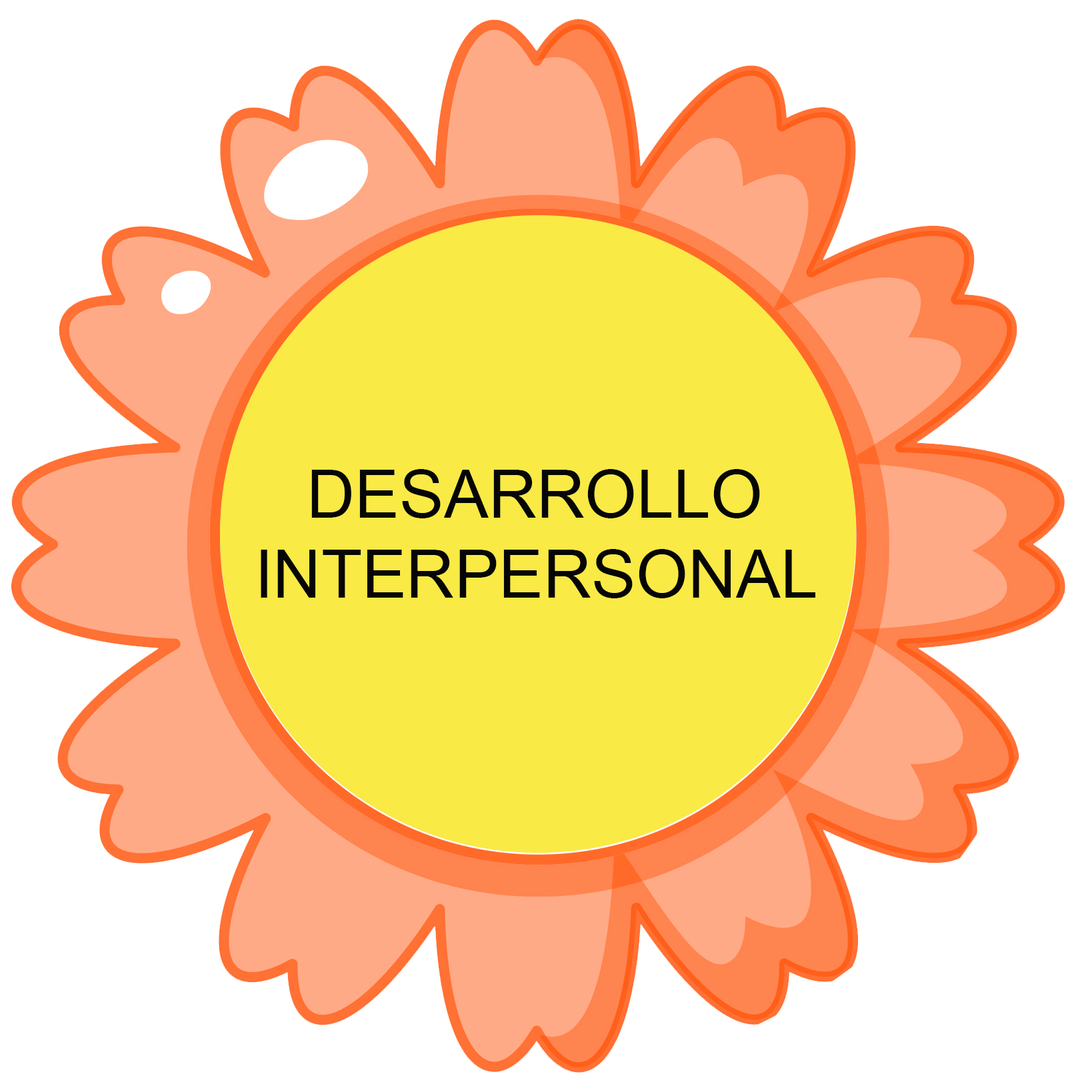
<style>
.page{position:relative;width:1092px;height:1092px;background:#ffffff}
.page>*{position:absolute;margin:0}
.t1{font:66.6px "ArialMT";color:#060606}
</style>
<div class="page">
<p class="t1" style="left:261px;top:469px;width:554px;height:129px;text-align:center">DESARROLLO<br>INTERPERSONAL</p>
</div>
